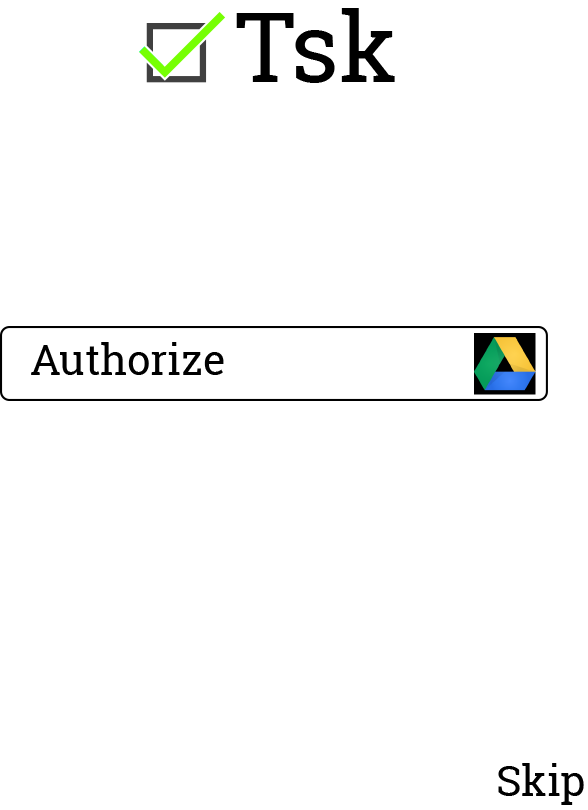
<style>
.page{position:relative;width:588px;height:810px;background:#ffffff}
.page>*{position:absolute;margin:0}
.t1{font:95.8px "RobotoSlab-Regular";color:#000000}
.t2{font:41.7px "RobotoSlab-Regular";color:#000000}
</style>
<div class="page">
<p class="t1" style="left:236px;top:8px;width:159px;height:75px">Tsk</p>
<p class="t2" style="left:31px;top:342px;width:193px;height:33px">Authorize</p>
<p class="t2" style="left:498px;top:763px;width:86px;height:42px">Skip</p>
</div>
